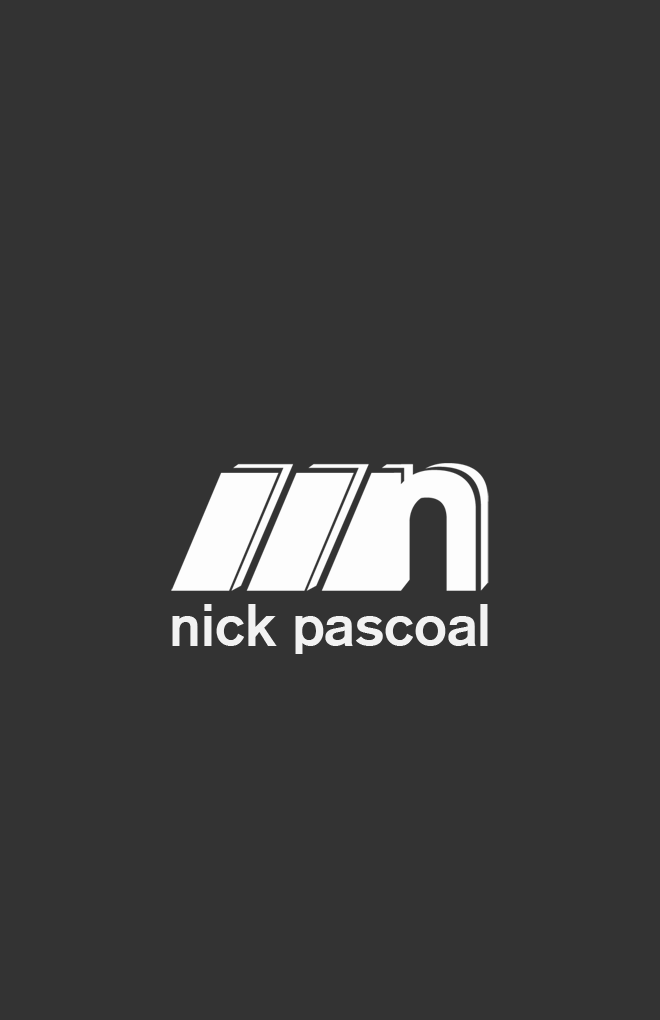
<style>
.page{position:relative;width:660px;height:1020px;background:#333333}
.page>*{position:absolute;margin:0}
.t1{font:57.3px "ReznorBroken";color:#f2f2f2}
</style>
<div class="page">
<p class="t1" style="left:172px;top:604px;width:316px;height:50px">nick pascoal</p>
</div>
